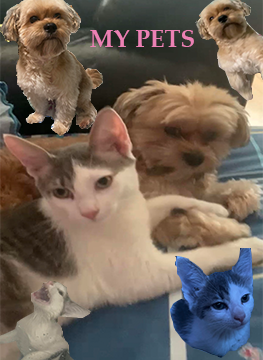
<style>
.page{position:relative;width:263px;height:360px}
.page>*{position:absolute;margin:0}
.t1{font:24px "PalatinoLinotype-Bold";color:#ec81b4}
</style>
<div class="page">
<p class="t1" style="left:90px;top:30px;width:104px;height:17px">MY PETS</p>
</div>
